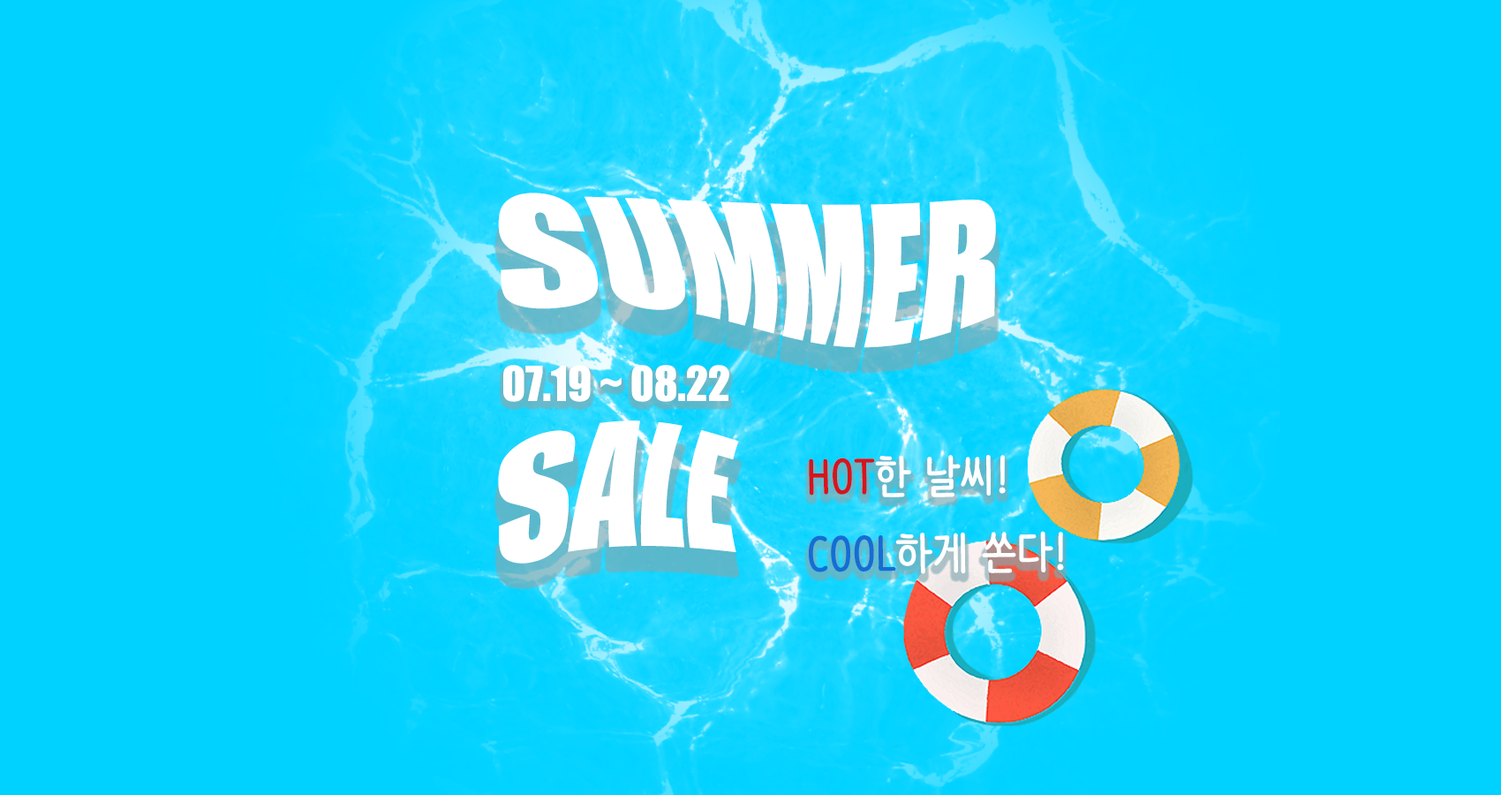
<style>
.page{position:relative;width:1501px;height:795px;background:#00d2ff}
.page>*{position:absolute;margin:0}
.t1{font:147.1px "Impact";color:#ffffff}
.t2{font:44.1px "Impact";color:#ffffff}
.t3{font:44.1px "NanumBarunpen";color:#ffffff;font-weight:bold}
.t4{font:44.1px "NanumBarunpen";color:#d5151e;font-weight:bold}
.t5{font:44.1px "NanumBarunpen";color:#156dd5;font-weight:bold}
</style>
<div class="page">
<p class="t1" style="left:498px;top:192px;width:498px;height:371px">SUMMER<br>SALE</p>
<p class="t2" style="left:503px;top:365px;width:226px;height:37px">07.19 ~ 08.22</p>
<p class="t3" style="left:809px;top:455px;width:255px;height:119px;rotate:-1deg"><span class="t4">HOT</span>한 날씨!<br><span class="t5">COOL</span>하게 쏜다!</p>
</div>
